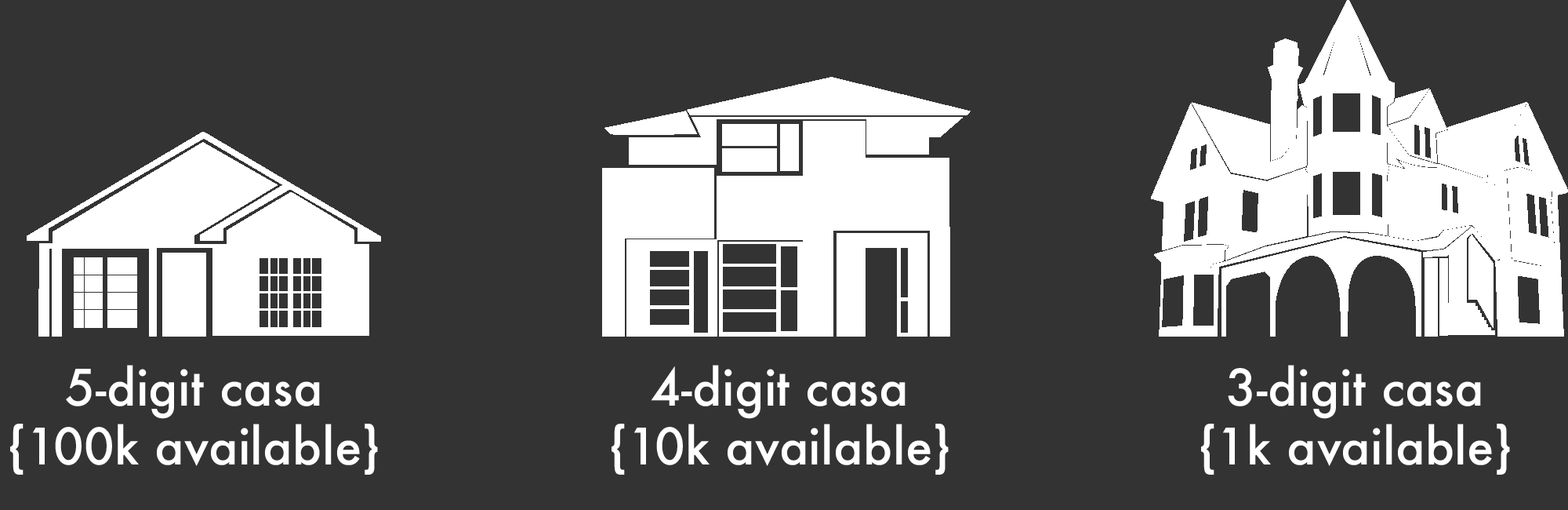
<style>
.page{position:relative;width:1568px;height:510px;background:#333333}
.page>*{position:absolute;margin:0}
.t1{font:49px "Futura-Medium";letter-spacing:0.005em;color:#ffffff}
</style>
<div class="page">
<p class="t1" style="left:10px;top:365px;width:368px;height:109px;text-align:center">5-digit casa<br>{100k available}</p>
<p class="t1" style="left:612px;top:365px;width:337px;height:109px;text-align:center">4-digit casa<br>{10k available}</p>
<p class="t1" style="left:1201px;top:365px;width:309px;height:109px;text-align:center">3-digit casa<br>{1k available}</p>
</div>
